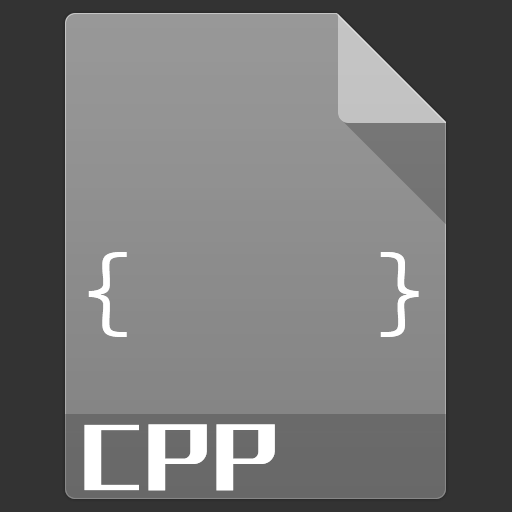
<style>
.page{position:relative;width:512px;height:512px;background:#333333}
.page>*{position:absolute;margin:0}
.t1{font:99px "SourceCodeProYaHeiHybrid";letter-spacing:0.07em;color:#ffffff}
.t2{font:72px "MFLiHei_Noncommercial-Regular";letter-spacing:0.07em;color:#ffffff}
</style>
<div class="page">
<p class="t1" style="left:88px;top:252px;width:331px;height:85px">{    }</p>
<p class="t2" style="left:84px;top:424px;width:191px;height:67px">CPP</p>
</div>
